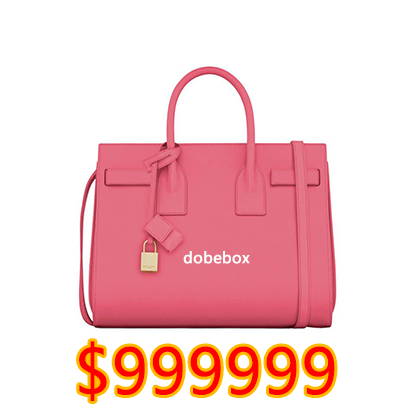
<style>
.page{position:relative;width:416px;height:416px;background:#ffffff}
.page>*{position:absolute;margin:0}
.t1{font:15px "MicrosoftYaHei";color:#ffffff;font-weight:bold}
.t2{font:62px "MicrosoftYaHei";color:#ff0000;font-weight:bold}
</style>
<div class="page">
<p class="t1" style="left:183px;top:251px;width:67px;height:13px">dobebox</p>
<p class="t2" style="left:79px;top:341px;width:256px;height:60px">$999999</p>
</div>
